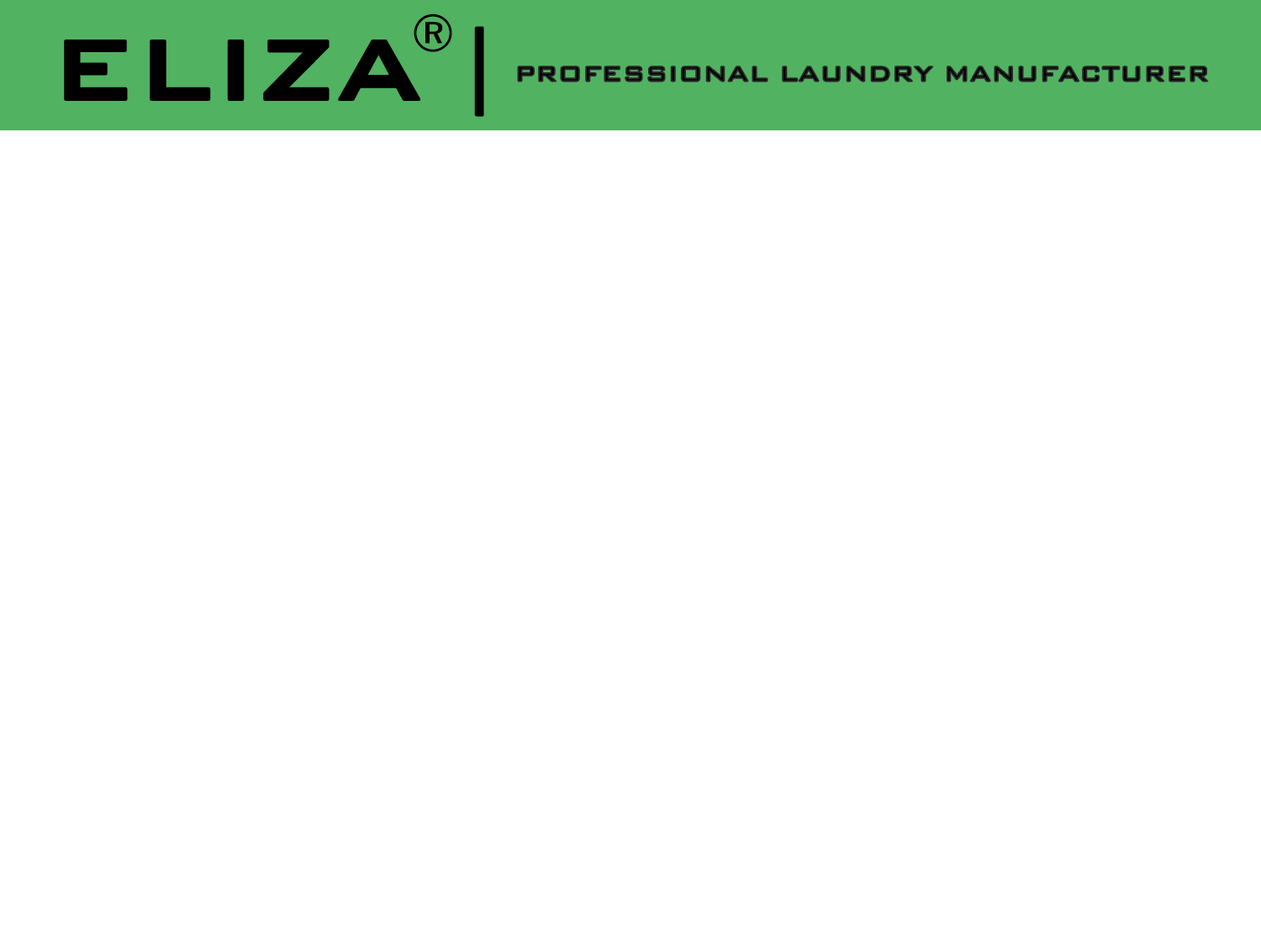
<style>
.page{position:relative;width:1261px;height:946px;background:#ffffff}
.page>*{position:absolute;margin:0}
.t1{font:52.5px "BankGothicBT-Medium";color:#000000}
.t2{font:113.8px "BankGothicBT-Medium";color:#000000}
.t3{font:28px "BankGothicBT-Medium";color:#000000}
</style>
<div class="page">
<p class="t1" style="left:414px;top:13px;width:38px;height:39px">®</p>
<p class="t2" style="left:65px;top:40px;width:354px;height:60px">ELIZA</p>
<p class="t3" style="left:518px;top:66px;width:690px;height:16px">PROFESSIONAL LAUNDRY MANUFACTURER</p>
</div>
